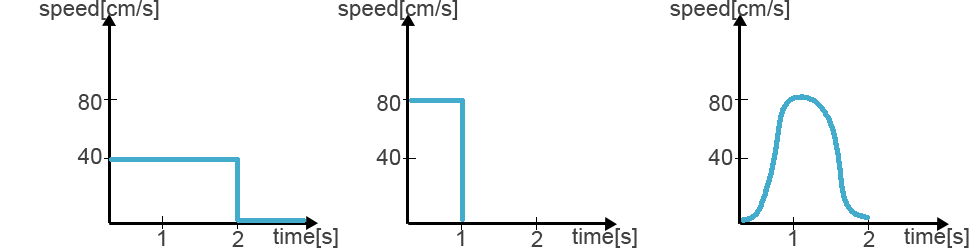
<style>
.page{position:relative;width:970px;height:249px;background:#ffffff}
.page>*{position:absolute;margin:0}
.t1{font:22.4px "ArialMT";color:#414141}
</style>
<div class="page">
<p class="t1" style="left:39px;top:0px;width:120px;height:20px">speed[cm/s]</p>
<p class="t1" style="left:338px;top:0px;width:120px;height:20px">speed[cm/s]</p>
<p class="t1" style="left:670px;top:0px;width:120px;height:20px">speed[cm/s]</p>
<p class="t1" style="left:78px;top:94px;width:24px;height:16px">80</p>
<p class="t1" style="left:377px;top:95px;width:24px;height:16px">80</p>
<p class="t1" style="left:709px;top:95px;width:24px;height:16px">80</p>
<p class="t1" style="left:77px;top:148px;width:25px;height:16px">40</p>
<p class="t1" style="left:376px;top:149px;width:25px;height:16px">40</p>
<p class="t1" style="left:708px;top:149px;width:25px;height:16px">40</p>
<p class="t1" style="left:158px;top:230px;width:7px;height:16px">1</p>
<p class="t1" style="left:232px;top:231px;width:12px;height:16px">2</p>
<p class="t1" style="left:273px;top:228px;width:65px;height:20px">time[s]</p>
<p class="t1" style="left:457px;top:230px;width:7px;height:16px">1</p>
<p class="t1" style="left:531px;top:231px;width:12px;height:16px">2</p>
<p class="t1" style="left:572px;top:228px;width:65px;height:20px">time[s]</p>
<p class="t1" style="left:789px;top:230px;width:7px;height:16px">1</p>
<p class="t1" style="left:863px;top:231px;width:12px;height:16px">2</p>
<p class="t1" style="left:904px;top:228px;width:65px;height:20px">time[s]</p>
</div>
